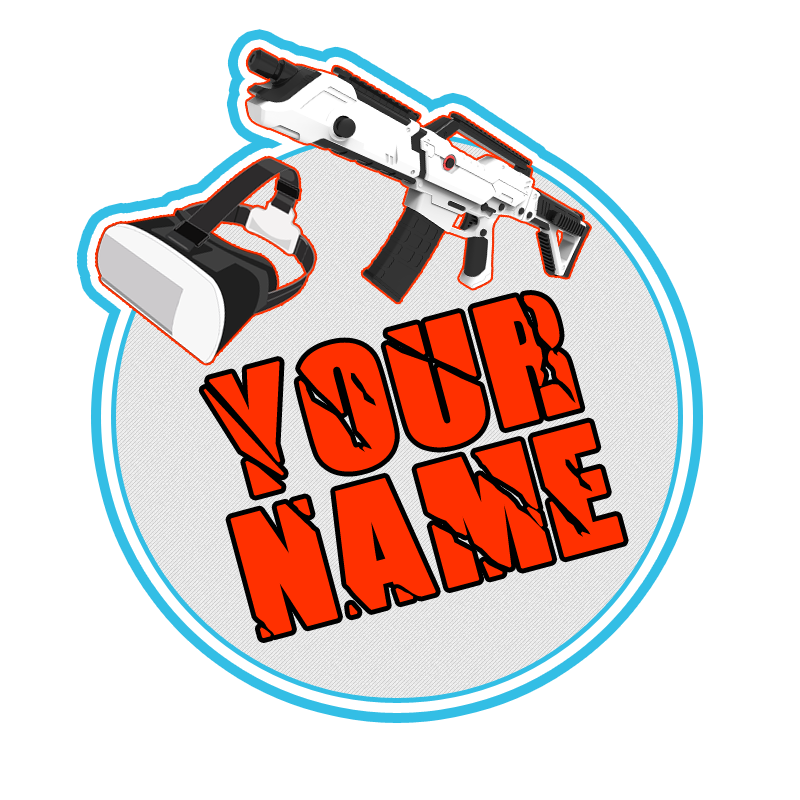
<style>
.page{position:relative;width:800px;height:800px;background:#ffffff}
.page>*{position:absolute;margin:0}
.t1{font:115.1px/139.9px "Insomnia-Regular";color:#ff3000;font-weight:bold;scale:1.04 1}
</style>
<div class="page">
<p class="t1" style="left:203px;top:295px;width:421px;height:343px;text-align:center;rotate:-15deg">Your<br>NAME</p>
</div>
